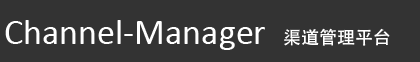
<style>
.page{position:relative;width:420px;height:62px;background:#333333}
.page>*{position:absolute;margin:0}
.t1{font:36px "Calibri";color:#ffffff}
.t2{font:18px "AdobeHeitiStd-Regular";color:#ffffff}
</style>
<div class="page">
<p class="t1" style="left:5px;top:20px;width:260px;height:30px">Channel-Manager</p>
<p class="t2" style="left:284px;top:28px;width:106px;height:18px">渠道管理平台</p>
</div>
